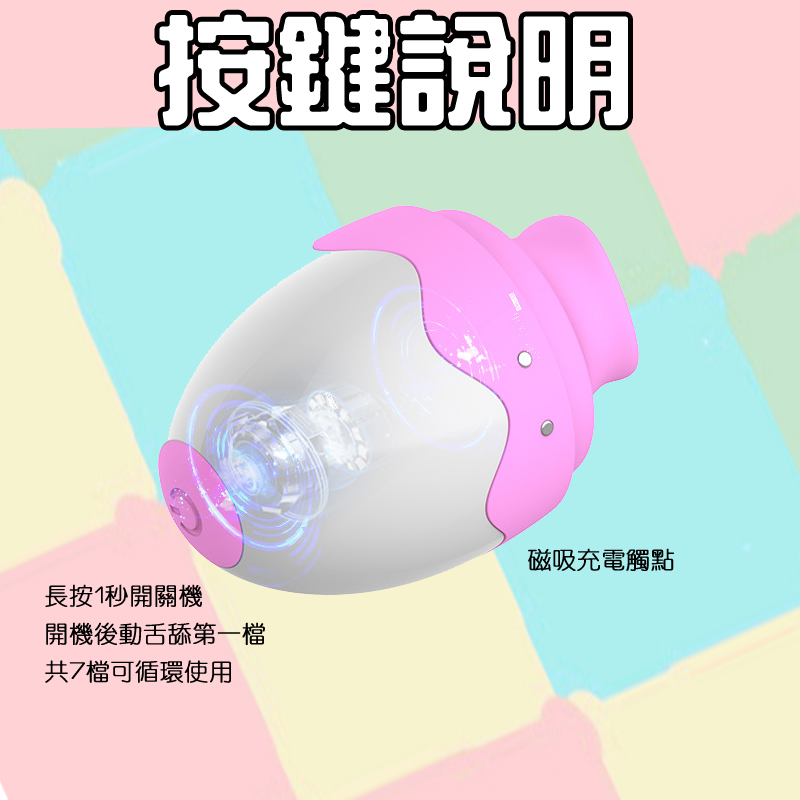
<style>
.page{position:relative;width:800px;height:800px}
.page>*{position:absolute;margin:0}
.t1{font:117.3px "HanWangZonYi";color:#ffffff;font-weight:bold}
.t2{font:24px "HanWangYenLight";color:#000000;font-weight:bold}
</style>
<div class="page">
<p class="t1" style="left:159px;top:14px;width:469px;height:112px">按鍵說明</p>
<p class="t2" style="left:528px;top:548px;width:146px;height:23px">磁吸充電觸點</p>
<p class="t2" style="left:45px;top:584px;width:220px;height:99px">長按1秒開關機<br>開機後動舌舔第一檔<br>共7檔可循環使用</p>
</div>
